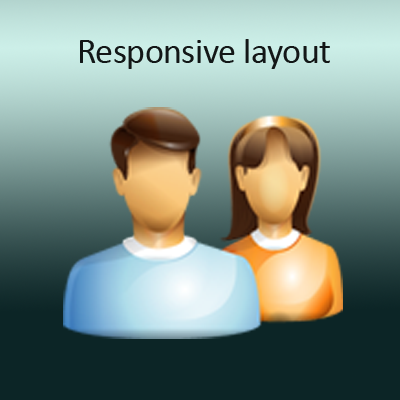
<style>
.page{position:relative;width:400px;height:400px}
.page>*{position:absolute;margin:0}
.t1{font:36px "Calibri";letter-spacing:-0.015em;color:#131717}
</style>
<div class="page">
<p class="t1" style="left:80px;top:39px;width:250px;height:30px">Responsive layout</p>
</div>
